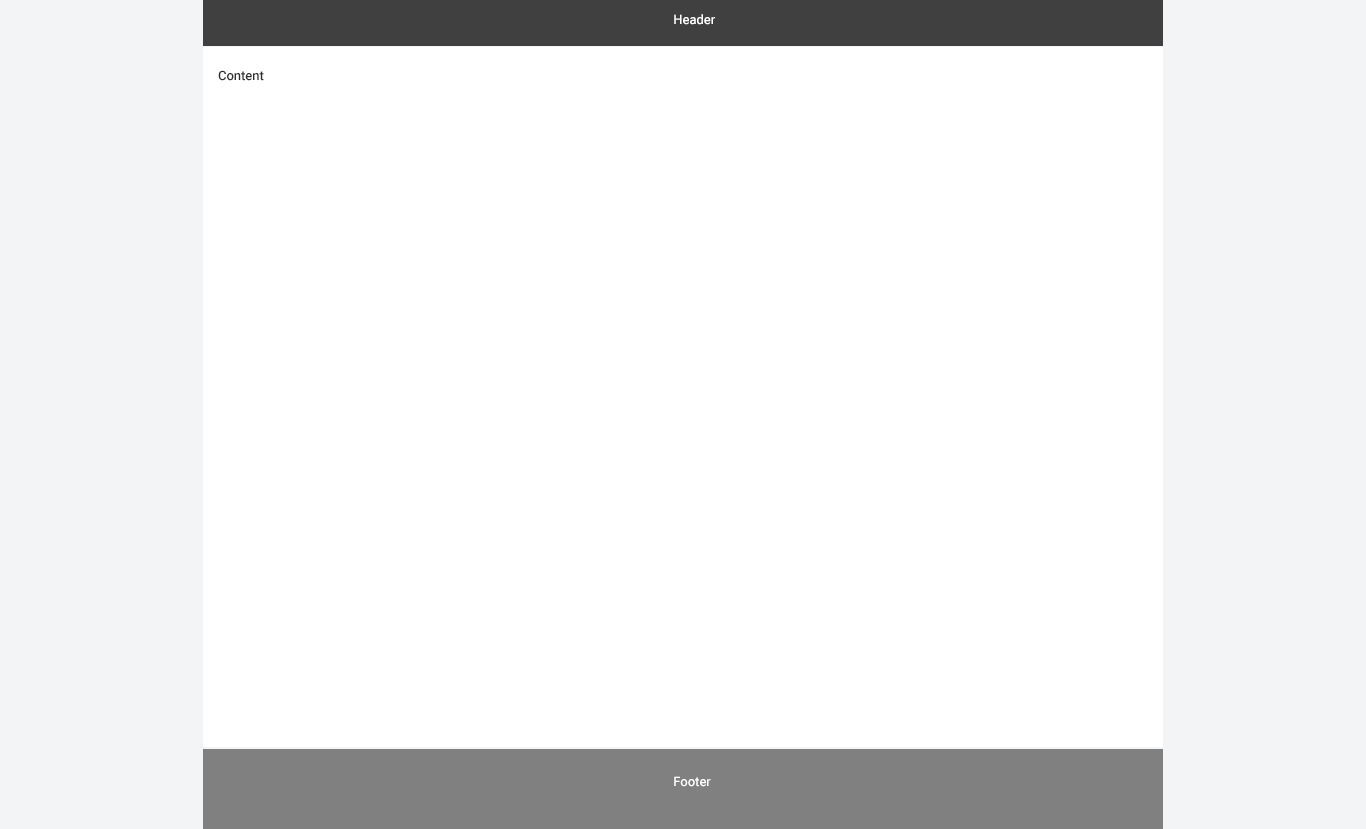
<style>
.page{position:relative;width:1366px;height:829px;background:#ffffff}
.page>*{position:absolute;margin:0}
.t1{font:13px "Roboto-Medium";color:#ffffff}
.t2{font:13px "Roboto-Medium";color:#2f2e2e}
</style>
<div class="page">
<p class="t1" style="left:674px;top:14px;width:41px;height:11px">Header</p>
<p class="t2" style="left:218px;top:70px;width:46px;height:11px">Content</p>
<p class="t1" style="left:674px;top:776px;width:37px;height:11px">Footer</p>
</div>
